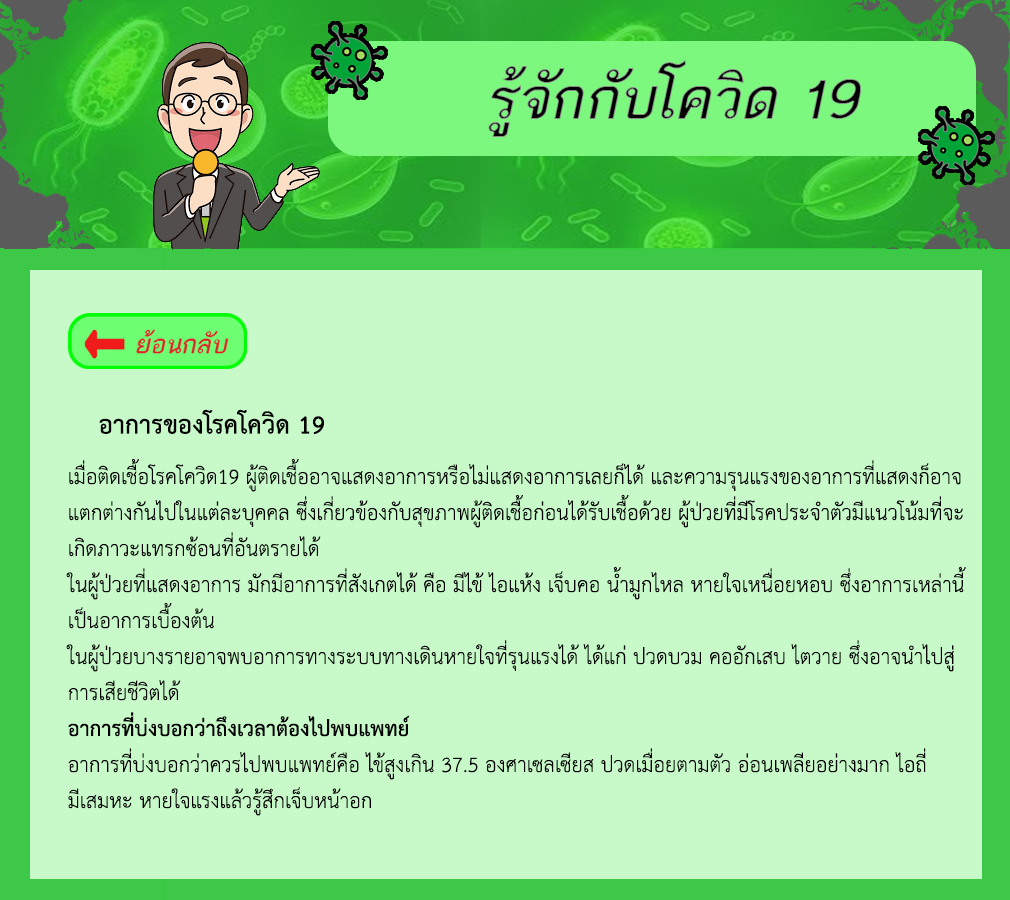
<style>
.page{position:relative;width:1010px;height:900px;background:#c8fac9}
.page>*{position:absolute;margin:0}
.t1{font:36px "THSarabunPSK-Bold";color:#000000}
.t2{font:30px "THSarabunPSK";color:#000000}
.t3{font:30px "THSarabunPSK-Bold";color:#000000}
</style>
<div class="page">
<p class="t1" style="left:99px;top:409px;width:225px;height:26px">อาการของโรคโควิด 19</p>
<p class="t2" style="left:66px;top:458px;width:900px;height:358px">เมื่อติดเชื้อโรคโควิด19 ผู้ติดเชื้ออาจแสดงอาการหรือไม่แสดงอาการเลยก็ได้ และความรุนแรงของอาการที่แสดงก็อาจ<br>แตกต่างกันไปในแต่ละบุคคล ซึ่งเกี่ยวข้องกับสุขภาพผู้ติดเชื้อก่อนได้รับเชื้อด้วย ผู้ป่วยที่มีโรคประจำตัวมีแนวโน้มที่จะ<br>เกิดภาวะแทรกซ้อนที่อันตรายได้<br>ในผู้ป่วยที่แสดงอาการ มักมีอาการที่สังเกตได้ คือ มีไข้ ไอแห้ง เจ็บคอ น้ำมูกไหล หายใจเหนื่อยหอบ ซึ่งอาการเหล่านี้<br>เป็นอาการเบื้องต้น<br>ในผู้ป่วยบางรายอาจพบอาการทางระบบทางเดินหายใจที่รุนแรงได้ ได้แก่ ปวดบวม คออักเสบ ไตวาย ซึ่งอาจนำไปสู่<br>การเสียชีวิตได้<br><span class="t3">อาการที่บ่งบอกว่าถึงเวลาต้องไปพบแพทย์<br></span>อาการที่บ่งบอกว่าควรไปพบแพทย์คือ ไข้สูงเกิน 37.5 องศาเซลเซียส ปวดเมื่อยตามตัว อ่อนเพลียอย่างมาก ไอถี่<br>มีเสมหะ หายใจแรงแล้วรู้สึกเจ็บหน้าอก</p>
</div>
